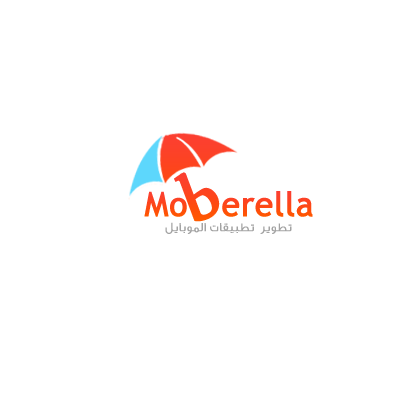
<style>
.page{position:relative;width:400px;height:400px;background:#ffffff}
.page>*{position:absolute;margin:0}
.t1{font:33.3px "TrebuchetMS";letter-spacing:0.005em;color:#fe4814;font-weight:bold}
.t2{font:12.5px "GESSTextLight-Light";letter-spacing:0.005em;color:#a3a3a3;font-weight:bold}
</style>
<div class="page">
<p class="t1" style="left:144px;top:191px;width:169px;height:26px">Mo   erella</p>
<p class="t2" style="left:165px;top:222px;width:127px;height:12px">تطوير  تطبيقات الموبايل</p>
</div>
